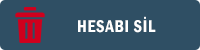
<style>
.page{position:relative;width:200px;height:50px;background:#2f4f64}
.page>*{position:absolute;margin:0}
.t1{font:17.8px "FranklinGothic-DemiCond";letter-spacing:0.04em;color:#ffffff;scale:0.93 1}
</style>
<div class="page">
<p class="t1" style="left:78px;top:16px;width:78px;height:17px">HESABI SİL</p>
</div>
